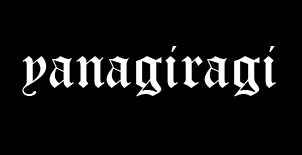
<style>
.page{position:relative;width:302px;height:155px;background:#000000}
.page>*{position:absolute;margin:0}
.t1{font:60px "OldEnglishTextMT";color:#ffffff}
</style>
<div class="page">
<p class="t1" style="left:22px;top:46px;width:254px;height:51px">yanagiragi</p>
</div>
